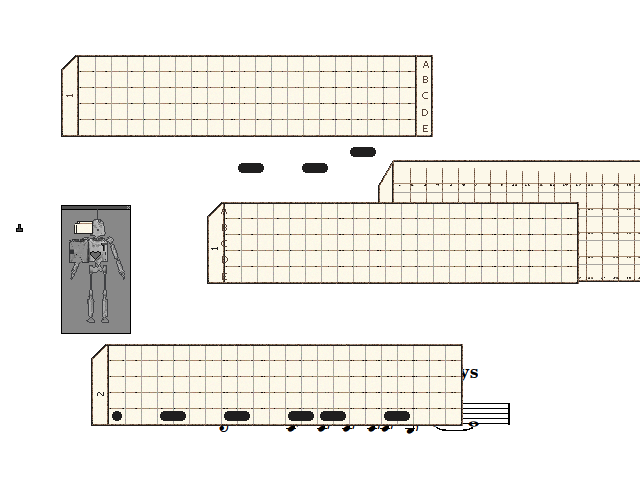
<style>
.page{position:relative;width:640px;height:480px;background:#ffffff}
.page>*{position:absolute;margin:0}
.t1{font:10px "Tahoma";color:#564238}
.t2{font:10px "Tahoma";color:#554137}
.t3{font:10.1px "Tahoma";color:#564238}
.t4{font:10.1px "Tahoma";color:#201f1f}
</style>
<div class="page">
<p class="t1" style="left:423px;top:61px;width:6px;height:7px">A</p>
<p class="t2" style="left:423px;top:76px;width:5px;height:7px">B</p>
<p class="t3" style="left:66px;top:94px;width:7px;height:3px;rotate:-90deg">1</p>
<p class="t2" style="left:422px;top:92px;width:6px;height:7px">C</p>
<p class="t2" style="left:422px;top:109px;width:6px;height:7px">D</p>
<p class="t2" style="left:423px;top:125px;width:5px;height:7px">E</p>
<p class="t1" style="left:221px;top:207px;width:6px;height:7px">A</p>
<p class="t2" style="left:222px;top:224px;width:5px;height:7px">B</p>
<p class="t2" style="left:221px;top:240px;width:6px;height:7px">C</p>
<p class="t4" style="left:211px;top:247px;width:7px;height:3px;rotate:-90deg">1</p>
<p class="t2" style="left:222px;top:256px;width:6px;height:7px">D</p>
<p class="t2" style="left:222px;top:273px;width:5px;height:7px">E</p>
<p class="t4" style="left:97px;top:392px;width:7px;height:4px;rotate:-90deg">2</p>
</div>
